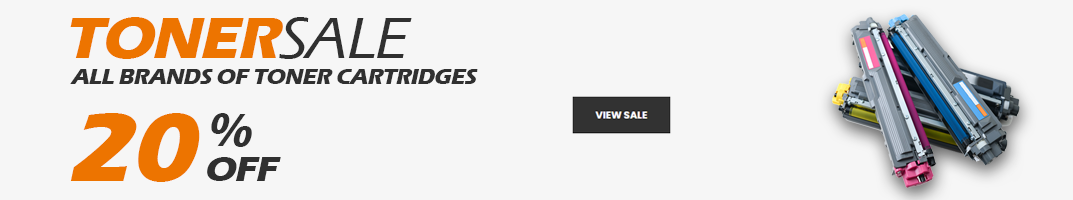
<style>
.page{position:relative;width:1073px;height:200px;background:#f6f6f6}
.page>*{position:absolute;margin:0}
.t1{font:60px "ErasITC-Bold";letter-spacing:-0.025em;color:#ed7400;text-transform:uppercase;font-style:italic}
.t2{font:60px "ErasITC-Medium";letter-spacing:-0.025em;color:#303030;text-transform:uppercase;font-style:italic}
.t3{font:22px "ErasITC-Bold";letter-spacing:-0.025em;color:#303030;text-transform:uppercase;font-style:italic}
.t4{font:100px "ErasITC-Bold";letter-spacing:-0.025em;color:#ed7400;text-transform:uppercase;font-style:italic}
.t5{font:48px "ErasITC-Bold";letter-spacing:-0.025em;color:#303030;text-transform:uppercase;font-style:italic}
.t6{font:36px "ErasITC-Bold";letter-spacing:-0.025em;color:#303030;text-transform:uppercase;font-style:italic}
</style>
<div class="page">
<p class="t1" style="left:70px;top:17px;width:342px;height:42px">toner<span class="t2">sale</span></p>
<p class="t3" style="left:70px;top:69px;width:408px;height:15px">All brands of toner cartridges</p>
<p class="t4" style="left:70px;top:113px;width:130px;height:69px">20</p>
<p class="t5" style="left:211px;top:113px;width:41px;height:34px">%</p>
<p class="t6" style="left:207px;top:157px;width:74px;height:24px">off</p>
</div>
